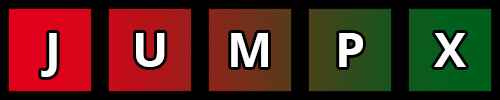
<style>
.page{position:relative;width:500px;height:100px;background:#000000}
.page>*{position:absolute;margin:0}
.t1{font:48px "OpenSans-Bold";color:#fefefe}
</style>
<div class="page">
<p class="t1" style="left:41px;top:33px;width:16px;height:44px">J</p>
<p class="t1" style="left:136px;top:33px;width:29px;height:34px">U</p>
<p class="t1" style="left:231px;top:33px;width:37px;height:34px">M</p>
<p class="t1" style="left:339px;top:33px;width:24px;height:34px">P</p>
<p class="t1" style="left:434px;top:33px;width:32px;height:34px">X</p>
</div>
